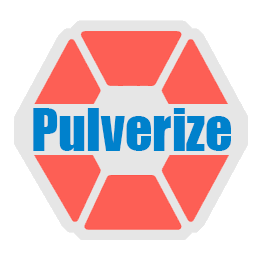
<style>
.page{position:relative;width:256px;height:256px;background:#ffffff}
.page>*{position:absolute;margin:0}
.t1{font:54px "Impact";color:#0081cc}
</style>
<div class="page">
<p class="t1" style="left:33px;top:108px;width:198px;height:43px">Pulverize</p>
</div>
